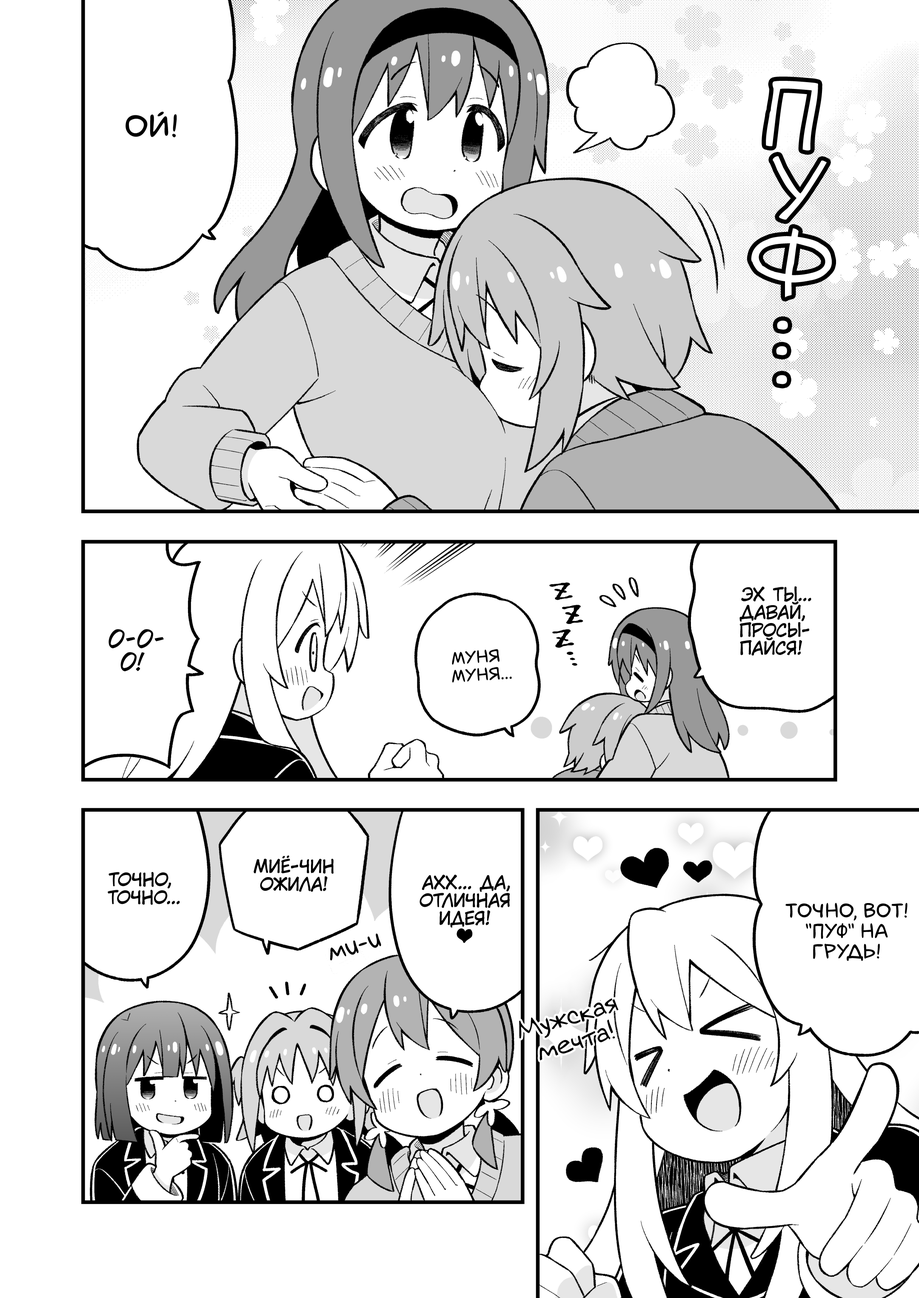
<style>
.page{position:relative;width:919px;height:1298px;background:#ffffff}
.page>*{position:absolute;margin:0}
.t1{font:89.3px "v_Augie";color:#ffffff;text-transform:uppercase}
.t2{font:31.9px "laCartoonerie";color:#000000;text-transform:uppercase}
.t3{font:17.9px "KuraiVoice2";color:#000000;text-transform:uppercase}
.t4{font:23px "v_CCJeffCampbell";color:#000000;text-transform:uppercase}
.t5{font:17.9px "laCartoonerie";color:#000000;text-transform:uppercase}
.t6{font:20.4px "laCartoonerie";color:#000000;text-transform:uppercase}
.t7{font:25.5px "laCartoonerie";color:#000000}
.t8{font:25.5px "v_Augie";color:#000000}
</style>
<div class="page">
<p class="t1" style="left:766px;top:81px;width:52px;height:70px;rotate:7deg">п</p>
<p class="t2" style="left:126px;top:111px;width:51px;height:26px">Ой!</p>
<p class="t1" style="left:751px;top:228px;width:81px;height:69px;rotate:5deg">ф</p>
<p class="t1" style="left:777px;top:320px;width:11px;height:10px">.</p>
<p class="t1" style="left:776px;top:346px;width:11px;height:9px">.</p>
<p class="t1" style="left:776px;top:375px;width:11px;height:9px">.</p>
<p class="t3" style="left:739px;top:586px;width:72px;height:70px;text-align:center">Эх ты...<br>Давай,<br>просы-<br>пайся!</p>
<p class="t4" style="left:108px;top:629px;width:56px;height:42px;text-align:center">О-о-<br>о!</p>
<p class="t5" style="left:452px;top:649px;width:60px;height:33px;text-align:center;rotate:-4deg">муня<br>муня...</p>
<p class="t3" style="left:254px;top:855px;width:80px;height:37px;text-align:center">Миё-чин<br>ожила!</p>
<p class="t3" style="left:108px;top:872px;width:72px;height:32px;text-align:center">Точно,<br>точно...</p>
<p class="t3" style="left:419px;top:874px;width:91px;height:69px;text-align:center">Ахх... Да,<br>отличная<br>идея!<br>♥</p>
<p class="t6" style="left:785px;top:902px;width:122px;height:59px;text-align:center">Точно, вот!<br>"Пуф" на<br>грудь!</p>
<p class="t7" style="left:330px;top:933px;width:51px;height:27px;rotate:-17deg">ми-и</p>
<p class="t8" style="left:519px;top:998px;width:100px;height:62px;text-align:center;rotate:-17deg">Мужская<br>мечта!</p>
</div>
